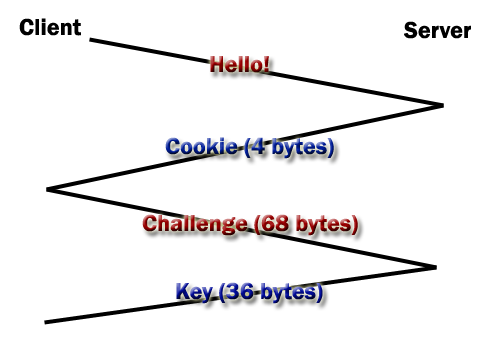
<style>
.page{position:relative;width:504px;height:360px;background:#ffffff}
.page>*{position:absolute;margin:0}
.t1{font:24px "FranklinGothic-Demi";color:#000000}
.t2{font:24px "FranklinGothic-Demi"}
</style>
<div class="page">
<p class="t1" style="left:19px;top:18px;width:62px;height:18px">Client</p>
<p class="t1" style="left:404px;top:21px;width:67px;height:18px">Server</p>
<p class="t2" style="left:210px;top:56px;width:59px;height:17px">Hello!</p>
<p class="t2" style="left:165px;top:137px;width:169px;height:22px">Cookie (4 bytes)</p>
<p class="t2" style="left:142px;top:214px;width:216px;height:22px">Challenge (68 bytes)</p>
<p class="t2" style="left:176px;top:282px;width:147px;height:22px">Key (36 bytes)</p>
</div>
